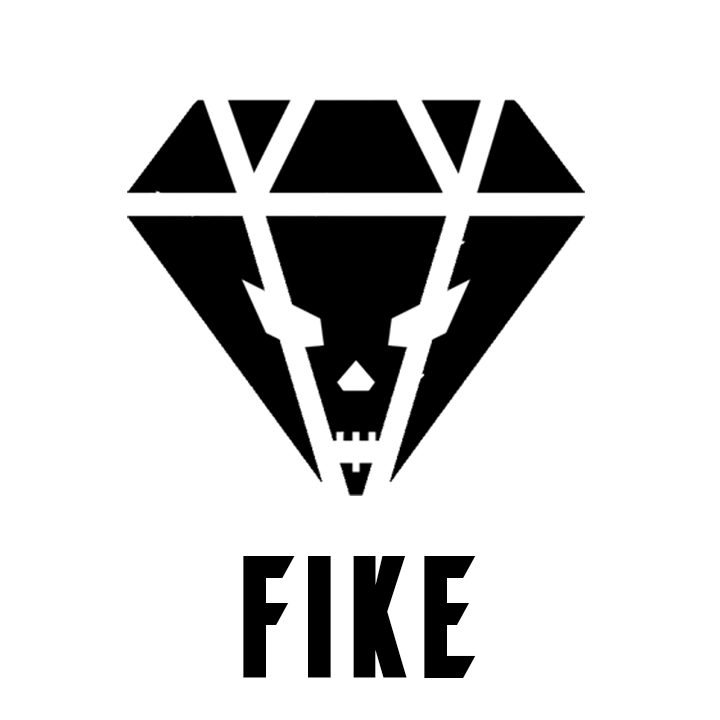
<style>
.page{position:relative;width:720px;height:720px;background:#ffffff}
.page>*{position:absolute;margin:0}
.t1{font:182.5px "BrandbeExtraBold";letter-spacing:0.05em;color:#000000}
</style>
<div class="page">
<p class="t1" style="left:243px;top:556px;width:233px;height:122px">FIKE</p>
</div>
